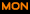
<style>
.page{position:relative;width:30px;height:14px;background:#000000}
.page>*{position:absolute;margin:0}
.t1{font:10px "Audiowide-Regular";letter-spacing:0.035em;color:#f67e00}
</style>
<div class="page">
<p class="t1" style="left:2px;top:2px;width:26px;height:8px">MON</p>
</div>
